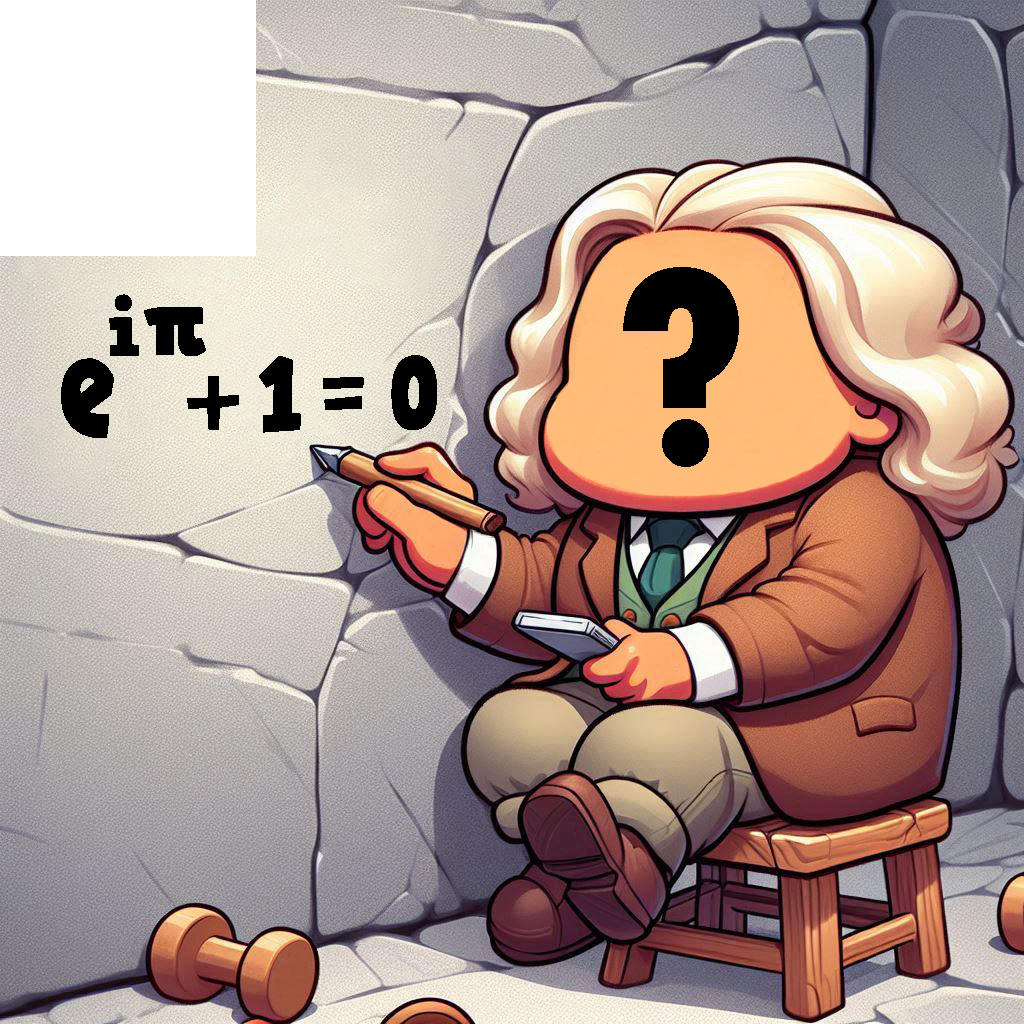
<style>
.page{position:relative;width:1024px;height:1024px}
.page>*{position:absolute;margin:0}
.t1{font:293.3px "TwCenMT-CondensedExtraBold";color:#000000}
.t2{font:80px "HVDComicSerifPro";color:#000000}
.t3{font:93.3px "HVDComicSerifPro";color:#000000}
.t4{font:149.3px "HVDComicSerifPro";color:#000000;scale:0.75 1}
.t5{font:102.7px "HVDComicSerifPro";color:#000000;scale:0.91 1}
.t6{font:102.7px "HVDComicSerifPro";color:#000000;scale:0.82 1}
</style>
<div class="page">
<p class="t1" style="left:623px;top:267px;width:116px;height:200px">?</p>
<p class="t2" style="left:109px;top:294px;width:97px;height:62px">i<span class="t3">π</span></p>
<p class="t4" style="left:61px;top:358px;width:53px;height:80px">e</p>
<p class="t5" style="left:259px;top:356px;width:42px;height:77px">1</p>
<p class="t6" style="left:391px;top:355px;width:46px;height:75px">0</p>
<p class="t3" style="left:187px;top:376px;width:52px;height:54px">+</p>
<p class="t5" style="left:323px;top:377px;width:41px;height:33px">=</p>
</div>
